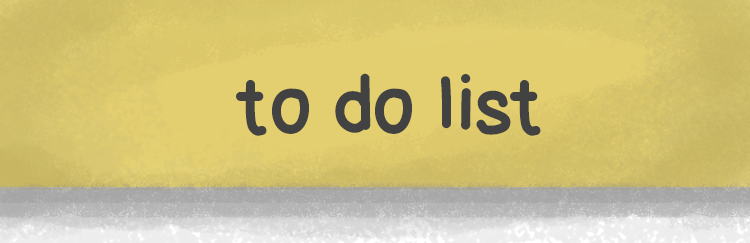
<style>
.page{position:relative;width:750px;height:243px}
.page>*{position:absolute;margin:0}
.t1{font:70px "Lettregaelle";color:#424242}
</style>
<div class="page">
<p class="t1" style="left:236px;top:73px;width:305px;height:63px">to do list</p>
</div>
